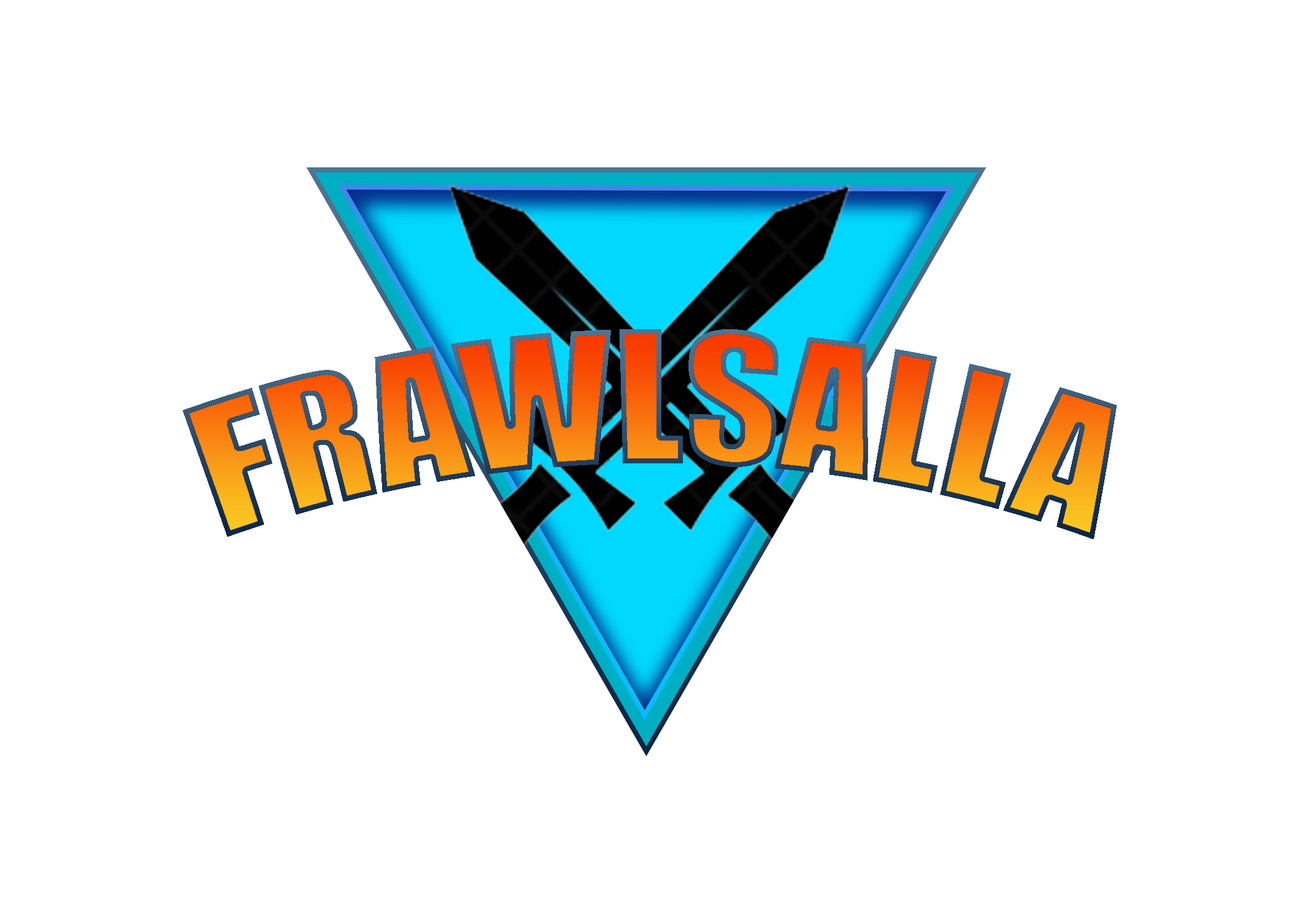
<style>
.page{position:relative;width:1292px;height:923px;background:#ffffff}
.page>*{position:absolute;margin:0}
.t1{font:169px "Impact"}
</style>
<div class="page">
<p class="t1" style="left:183px;top:329px;width:934px;height:210px">FRAWLSALLA</p>
</div>
